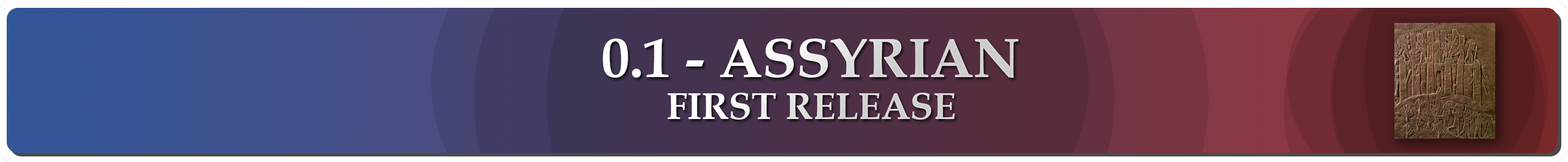
<style>
.page{position:relative;width:1568px;height:162px}
.page>*{position:absolute;margin:0}
.t1{font:56px "BookAntiqua-Bold"}
.t2{font:37.3px/42px "BookAntiqua-Bold"}
</style>
<div class="page">
<p class="t1" style="left:603px;top:39px;width:416px;height:81px;text-align:center">0.1 - ASSYRIAN<br><span class="t2">FIRST RELEASE</span></p>
</div>
